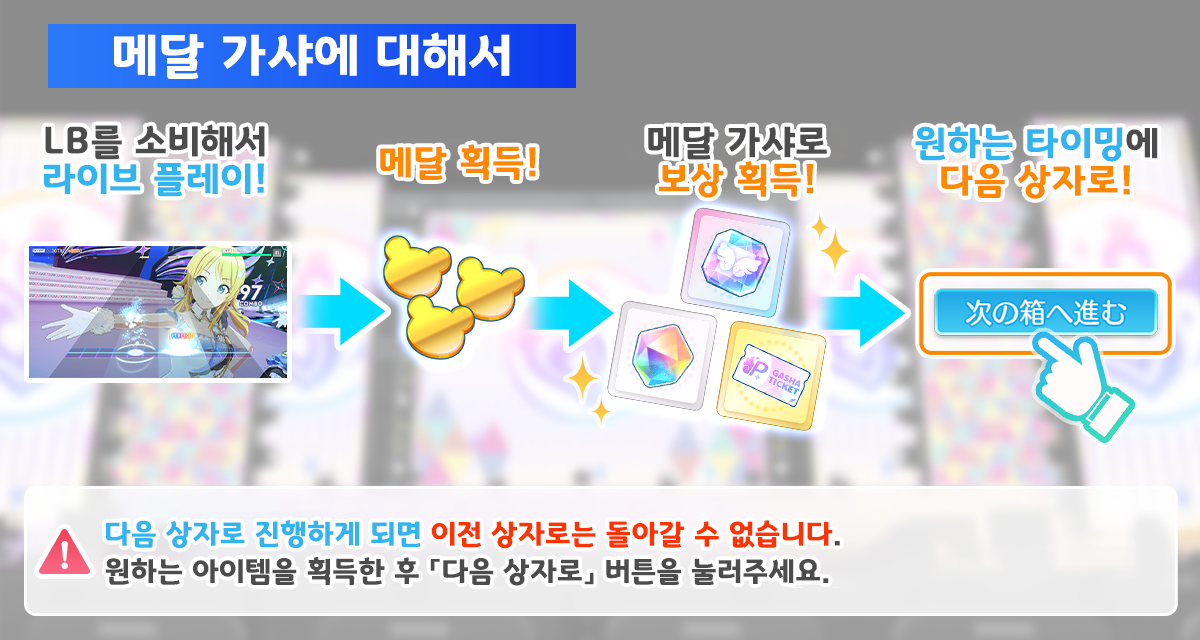
<style>
.page{position:relative;width:1200px;height:640px}
.page>*{position:absolute;margin:0}
.t1{font:50.7px "GyeonggiTitleB";letter-spacing:0.03em;color:#ffffff}
.t2{font:37.3px/37.3px "GyeonggiTitleB";letter-spacing:0.03em;color:#4c4c4c}
.t3{font:37.3px/37.3px "GyeonggiTitleB";letter-spacing:0.03em;color:#32b4f0}
.t4{font:37.3px/37.3px "GyeonggiTitleB";letter-spacing:0.03em;color:#fe8800}
.t5{font:37.3px/37.3px "GyeonggiTitleB";letter-spacing:0.03em;color:#31b4f0}
.t6{font:37.3px "GyeonggiTitleB";letter-spacing:0.03em;color:#fe8800}
.t7{font:29.3px/37.3px "GyeonggiTitleB";letter-spacing:0.03em;color:#4c4c4c}
.t8{font:29.3px/37.3px "GyeonggiTitleB";letter-spacing:0.03em;color:#31b4f0}
.t9{font:29.3px/37.3px "GyeonggiTitleB";letter-spacing:0.03em;color:#ff3301}
</style>
<div class="page">
<p class="t1" style="left:114px;top:32px;width:396px;height:47px">메달 가샤에 대해서</p>
<p class="t2" style="left:44px;top:124px;width:221px;height:73px;text-align:center">LB를 소비해서<br><span class="t3">라이브 플레이!</span></p>
<p class="t2" style="left:648px;top:126px;width:179px;height:72px;text-align:center">메달 가샤로<br><span class="t4">보상 획득!</span></p>
<p class="t5" style="left:915px;top:126px;width:243px;height:73px;text-align:center">원하는 타이밍<span class="t2">에<br></span><span class="t4">다음 상자로!</span></p>
<p class="t6" style="left:380px;top:144px;width:156px;height:36px">메달 획득!</p>
<p class="t7" style="left:105px;top:520px;width:735px;height:66px"><span class="t8">다음 상자로 진행하게 되면 </span><span class="t9">이전 상자로는 돌아갈 수 없습니다</span>.<br>원하는 아이템을 획득한 후 「다음 상자로」 버튼을 눌러주세요.</p>
</div>
